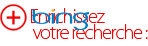
<style>
.page{position:relative;width:148px;height:46px;background:#ffffff}
.page>*{position:absolute;margin:0}
.t1{font:18.4px/16.3px "KozGoPr6N-ExtraLight";letter-spacing:-0.065em;color:#ed0101}
</style>
<div class="page">
<p class="t1" style="left:31px;top:8px;width:117px;height:31px">Enrichissez<br> votre recherche :</p>
</div>
